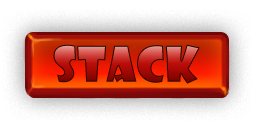
<style>
.page{position:relative;width:256px;height:128px}
.page>*{position:absolute;margin:0}
.t1{font:48px "ShowcardGothic-Reg"}
</style>
<div class="page">
<p class="t1" style="left:53px;top:44px;width:147px;height:40px">Stack</p>
</div>
